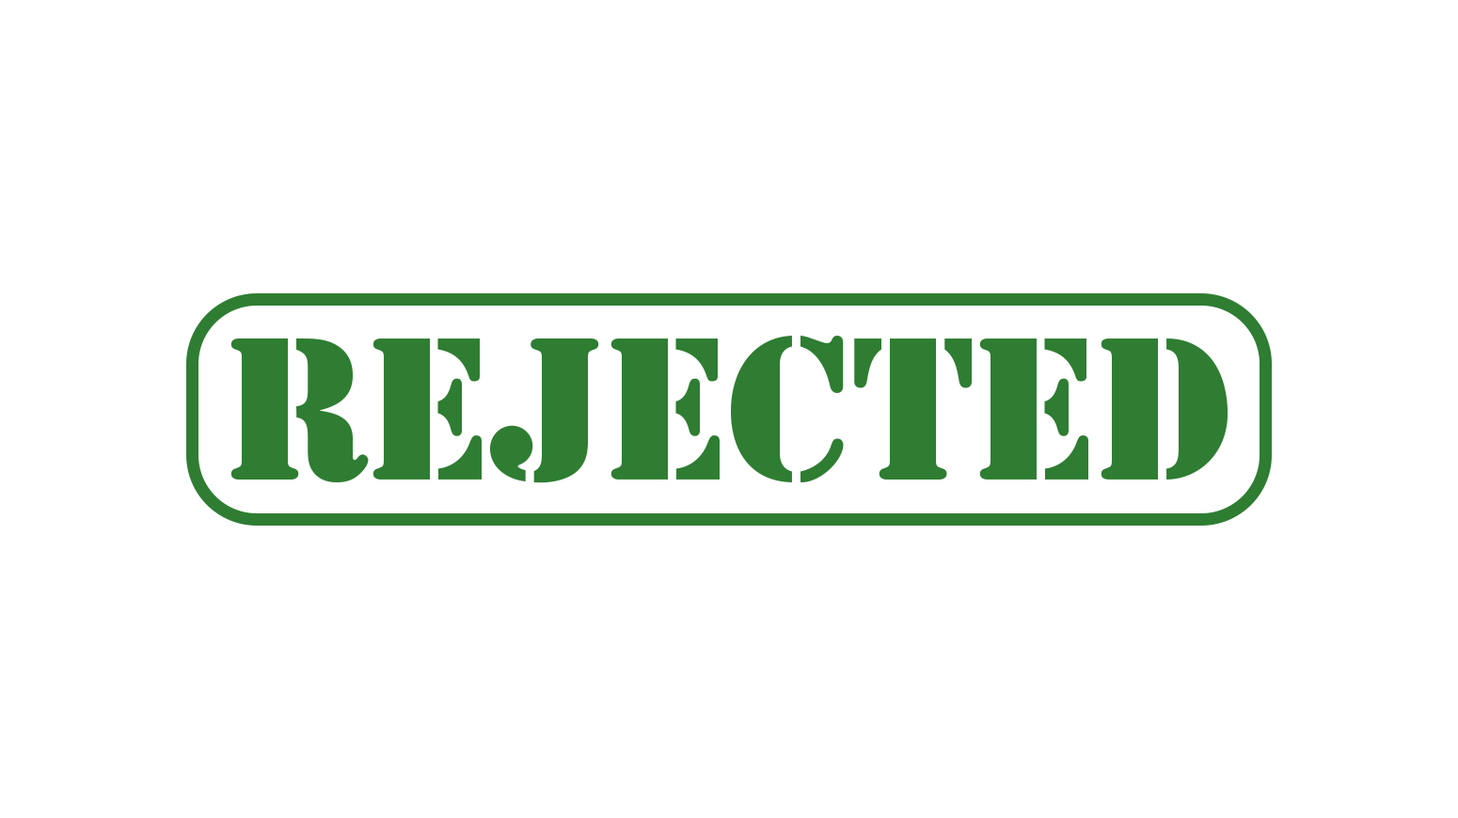
<style>
.page{position:relative;width:1458px;height:818px;background:#ffffff}
.page>*{position:absolute;margin:0}
.t1{font:188.1px "StencilStd";color:#2e7d32}
</style>
<div class="page">
<p class="t1" style="left:230px;top:336px;width:998px;height:147px">rejected</p>
</div>
